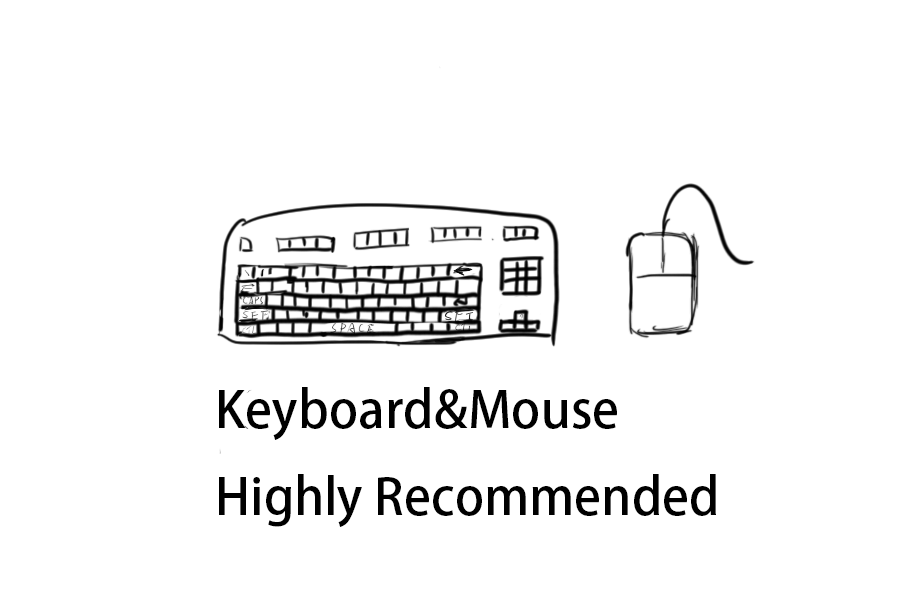
<style>
.page{position:relative;width:912px;height:614px;background:#ffffff}
.page>*{position:absolute;margin:0}
.t1{font:12px "AdobeHeitiStd-Regular";color:#000000}
</style>
<div class="page">
<p class="t1" style="left:219px;top:387px;width:497px;height:140px">Keyboard&amp;Mouse<br>Highly Recommended</p>
</div>
